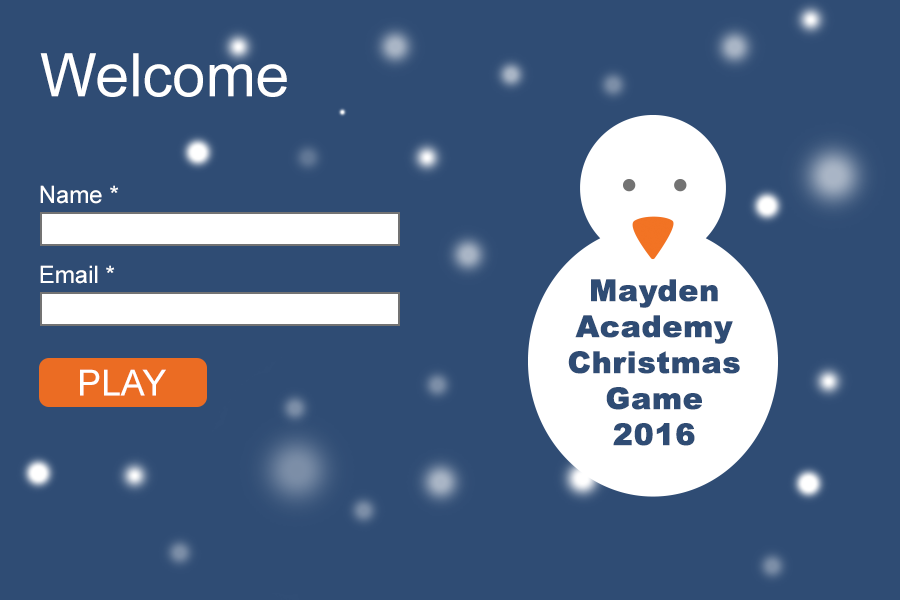
<style>
.page{position:relative;width:900px;height:600px;background:#2f4c74}
.page>*{position:absolute;margin:0}
.t1{font:60px "ArialMT";color:#ffffff}
.t2{font:24px "ArialMT";color:#ffffff}
.t3{font:30px "Arial-Black";color:#2f4c74;font-weight:bold}
.t4{font:36px "ArialMT";color:#ffffff}
</style>
<div class="page">
<p class="t1" style="left:40px;top:53px;width:247px;height:44px">Welcome</p>
<p class="t2" style="left:40px;top:185px;width:79px;height:19px">Name *</p>
<p class="t2" style="left:40px;top:265px;width:75px;height:19px">Email *</p>
<p class="t3" style="left:568px;top:279px;width:172px;height:167px;text-align:center">Mayden Academy Christmas Game 2016</p>
<p class="t4" style="left:80px;top:369px;width:86px;height:27px">PLAY</p>
</div>
